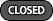
<style>
.page{position:relative;width:53px;height:21px}
.page>*{position:absolute;margin:0}
.t1{font:10px "AdobeHeitiStd-Regular";color:#ffffff}
</style>
<div class="page">
<p class="t1" style="left:8px;top:6px;width:37px;height:9px">CLOSED</p>
</div>
